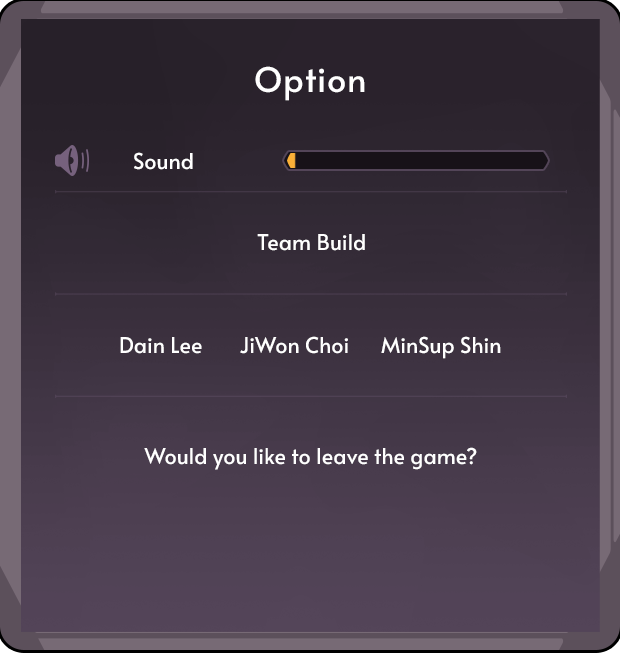
<style>
.page{position:relative;width:620px;height:653px}
.page>*{position:absolute;margin:0}
.t1{font:34.1px "Alata-Regular";color:#ffffff}
.t2{font:21.6px "Alata-Regular";color:#ffffff}
</style>
<div class="page">
<p class="t1" style="left:255px;top:66px;width:110px;height:35px">Option</p>
<p class="t2" style="left:134px;top:152px;width:59px;height:18px">Sound</p>
<p class="t2" style="left:257px;top:234px;width:108px;height:17px">Team Build</p>
<p class="t2" style="left:120px;top:336px;width:381px;height:23px">Dain Lee       JiWon Choi      MinSup Shin</p>
<p class="t2" style="left:144px;top:447px;width:333px;height:23px">Would you like to leave the game?</p>
</div>
